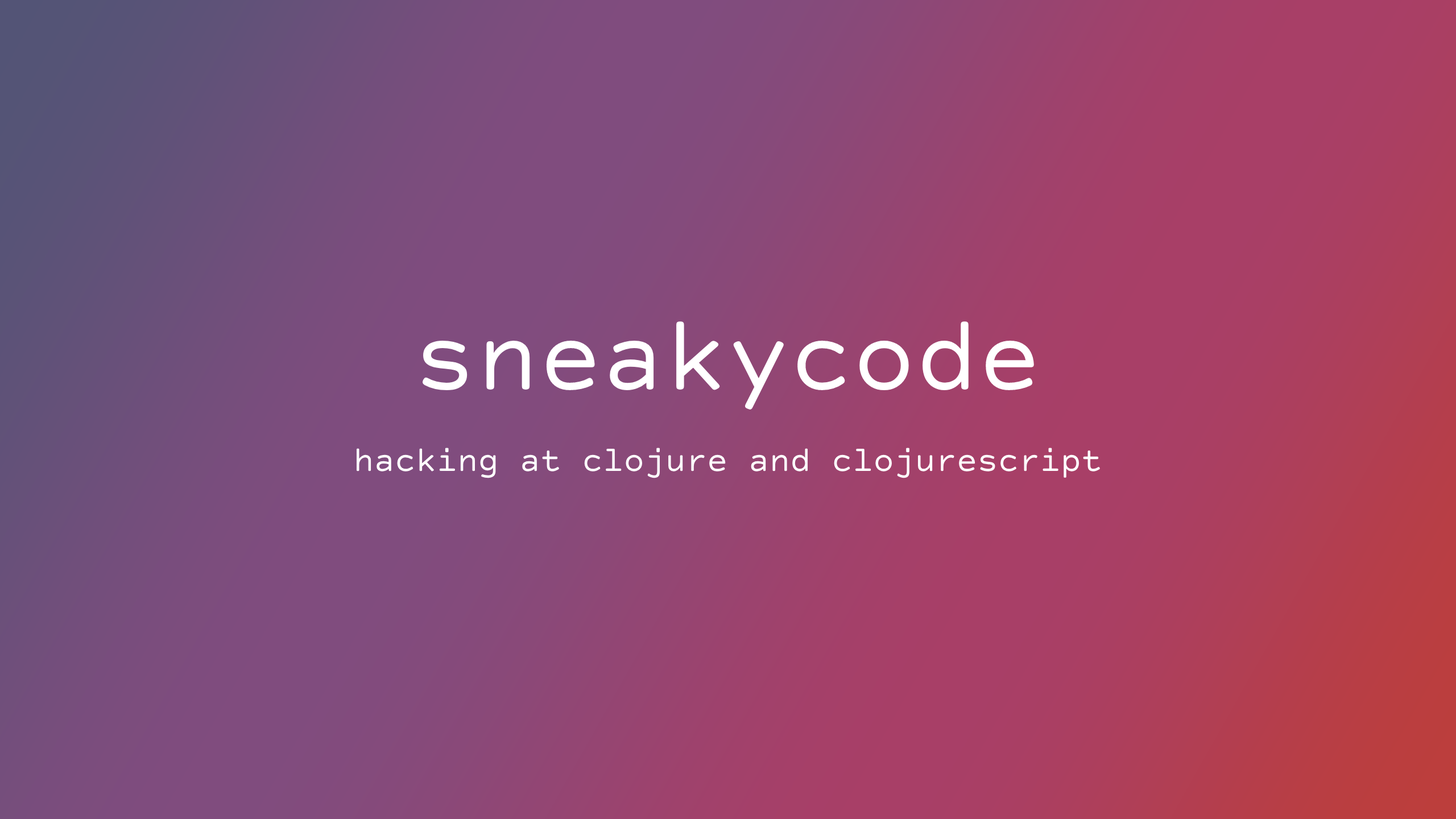
<style>
.page{position:relative;width:1456px;height:819px}
.page>*{position:absolute;margin:0}
.t1{font:104.6px "CourierPrimeCode-Regular";color:#ffffff}
.t2{font:34.7px "CourierPrimeCode-Regular";color:#ffffff}
</style>
<div class="page">
<p class="t1" style="left:422px;top:321px;width:612px;height:88px">sneakycode</p>
<p class="t2" style="left:357px;top:448px;width:743px;height:30px">hacking at clojure and clojurescript</p>
</div>
